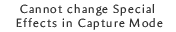
<style>
.page{position:relative;width:176px;height:32px;background:#ffffff}
.page>*{position:absolute;margin:0}
.t1{font:12px/14px "Amira-Light";letter-spacing:0.1em;color:#333333}
</style>
<div class="page">
<p class="t1" style="left:16px;top:4px;width:147px;height:26px;text-align:center">Cannot change Special <br>Effects in Capture Mode</p>
</div>
